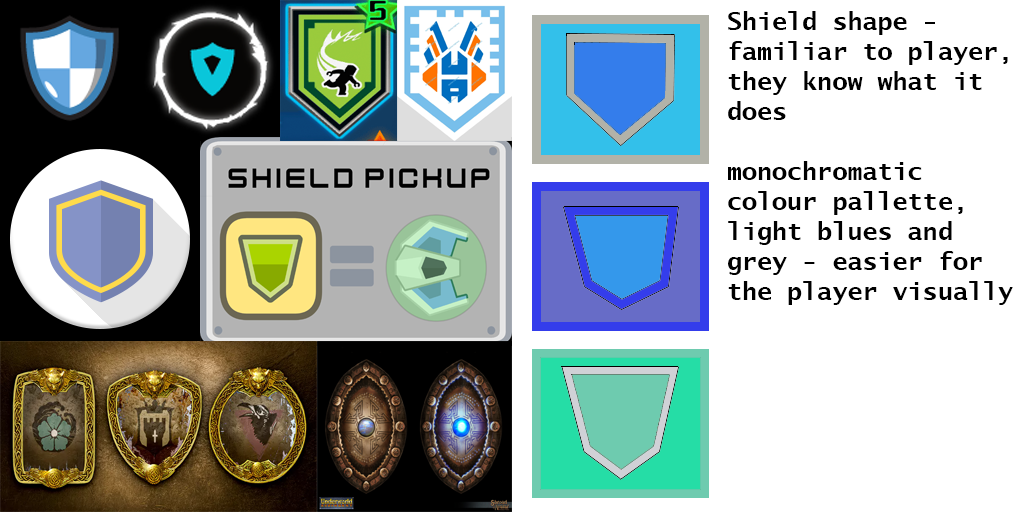
<style>
.page{position:relative;width:1024px;height:512px;background:#ffffff}
.page>*{position:absolute;margin:0}
.t1{font:25px "LucidaSans-TypewriterBold";color:#000000}
</style>
<div class="page">
<p class="t1" style="left:728px;top:11px;width:285px;height:294px">Shield shape - <br>familiar to player,<br>they know what it<br>does<br><br>monochromatic <br>colour pallette, <br>light blues and <br>grey - easier for<br>the player visually</p>
</div>
